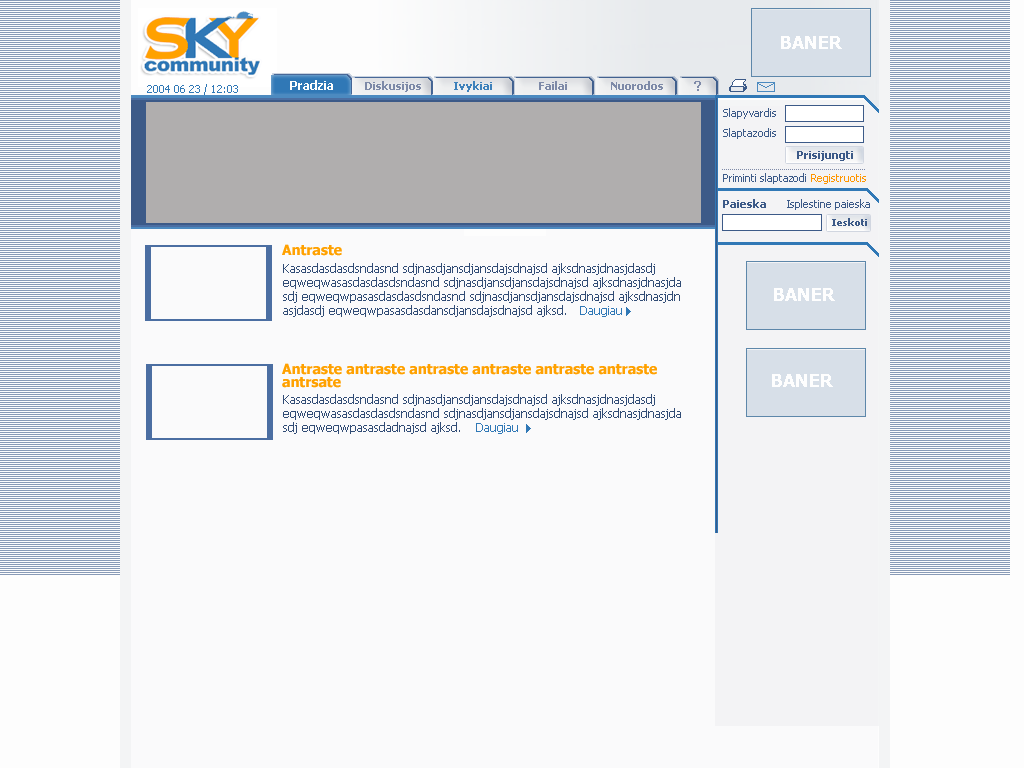
<style>
.page{position:relative;width:1024px;height:768px;background:#fafafb}
.page>*{position:absolute;margin:0}
.t1{font:18px "Tahoma-Bold";color:#fefefe}
.t2{font:11px "Tahoma";color:#3078b6}
.t3{font:12px "Tahoma-Bold";color:#fefefe}
.t4{font:11px "Tahoma-Bold";color:#7e8aa8}
.t5{font:11px "Tahoma-Bold";color:#3e81bb}
.t6{font:14px "Tahoma-Bold";color:#7e8aa8}
.t7{font:11px "Tahoma";color:#3c5a88}
.t8{font:11px "Tahoma-Bold";color:#3c5a88}
.t9{font:11px "Tahoma";color:#ff9600}
.t10{font:10px "Tahoma-Bold";color:#3c5a88}
.t11{font:14px "Tahoma-Bold";color:#ffa100}
.t12{font:12px/14px "Tahoma";color:#314c75}
.t13{font:12px "Tahoma";color:#3078b6}
.t14{font:14px/13px "Tahoma-Bold";color:#ffa100}
</style>
<div class="page">
<p class="t1" style="left:781px;top:36px;width:61px;height:13px">BANER</p>
<p class="t2" style="left:147px;top:84px;width:91px;height:11px">2004 06 23 / 12:03</p>
<p class="t3" style="left:290px;top:80px;width:43px;height:10px">Pradzia</p>
<p class="t4" style="left:365px;top:81px;width:56px;height:11px">Diskusijos</p>
<p class="t5" style="left:454px;top:81px;width:38px;height:11px">Ivykiai</p>
<p class="t4" style="left:539px;top:81px;width:28px;height:9px">Failai</p>
<p class="t4" style="left:611px;top:81px;width:52px;height:9px">Nuorodos</p>
<p class="t6" style="left:694px;top:81px;width:7px;height:10px">?</p>
<p class="t7" style="left:723px;top:108px;width:53px;height:11px">Slapyvardis</p>
<p class="t7" style="left:723px;top:128px;width:53px;height:11px">Slaptazodis</p>
<p class="t8" style="left:797px;top:151px;width:56px;height:10px">Prisijungti</p>
<p class="t7" style="left:723px;top:173px;width:83px;height:11px">Priminti slaptazodi</p>
<p class="t9" style="left:811px;top:174px;width:55px;height:10px">Registruotis</p>
<p class="t8" style="left:723px;top:199px;width:43px;height:9px">Paieska</p>
<p class="t7" style="left:787px;top:199px;width:83px;height:11px">Isplestine paieska</p>
<p class="t10" style="left:832px;top:218px;width:35px;height:8px">Ieskoti</p>
<p class="t11" style="left:282px;top:244px;width:60px;height:12px">Antraste</p>
<p class="t12" style="left:283px;top:263px;width:398px;height:54px">Kasasdasdasdsndasnd sdjnasdjansdjansdajsdnajsd ajksdnasjdnasjdasdj <br>eqweqwasasdasdasdsndasnd sdjnasdjansdjansdajsdnajsd ajksdnasjdnasjda<br>sdj eqweqwpasasdasdasdsndasnd sdjnasdjansdjansdajsdnajsd ajksdnasjdn<br>asjdasdj eqweqwpasasdasdansdjansdajsdnajsd ajksd.</p>
<p class="t1" style="left:774px;top:288px;width:61px;height:13px">BANER</p>
<p class="t13" style="left:580px;top:306px;width:42px;height:11px">Daugiau</p>
<p class="t14" style="left:282px;top:363px;width:375px;height:25px">Antraste antraste antraste antraste antraste antraste <br>antrsate</p>
<p class="t1" style="left:772px;top:374px;width:61px;height:13px">BANER</p>
<p class="t12" style="left:283px;top:394px;width:398px;height:40px">Kasasdasdasdsndasnd sdjnasdjansdjansdajsdnajsd ajksdnasjdnasjdasdj <br>eqweqwasasdasdasdsndasnd sdjnasdjansdjansdajsdnajsd ajksdnasjdnasjda<br>sdj eqweqwpasasdadnajsd ajksd.</p>
<p class="t13" style="left:476px;top:423px;width:42px;height:11px">Daugiau</p>
</div>
